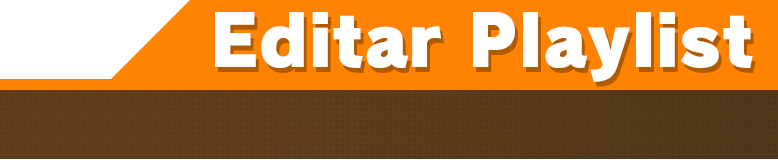
<style>
.page{position:relative;width:778px;height:160px;background:#ff8300}
.page>*{position:absolute;margin:0}
.t1{font:70.7px "RodinPro-UB";color:#ffffff}
</style>
<div class="page">
<p class="t1" style="left:215px;top:12px;width:538px;height:70px">Editar Playlist</p>
</div>
